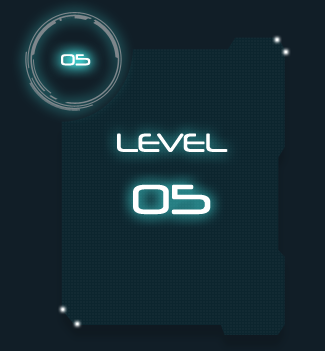
<style>
.page{position:relative;width:325px;height:351px;background:#111e27}
.page>*{position:absolute;margin:0}
.t1{font:15.1px "Neuropol-Regular";color:#ffffff}
.t2{font:25.1px "Neuropol-Regular";color:#ffffff}
.t3{font:40.2px "Neuropol-Regular";color:#ffffff}
</style>
<div class="page">
<p class="t1" style="left:61px;top:54px;width:30px;height:12px">05</p>
<p class="t2" style="left:117px;top:133px;width:111px;height:19px">LEVEL</p>
<p class="t3" style="left:133px;top:184px;width:78px;height:31px">05</p>
</div>
